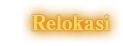
<style>
.page{position:relative;width:123px;height:46px;background:#ffffff}
.page>*{position:absolute;margin:0}
.t1{font:20px "RyuminPro-ExBold";letter-spacing:-0.04em;color:#ffd15f;font-weight:bold}
</style>
<div class="page">
<p class="t1" style="left:32px;top:15px;width:78px;height:16px;opacity:0.97">Relokasi</p>
</div>
